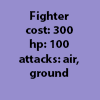
<style>
.page{position:relative;width:100px;height:100px;background:#968dce}
.page>*{position:absolute;margin:0}
.t1{font:12px "MyriadPro-Bold";color:#000000}
</style>
<div class="page">
<p class="t1" style="left:19px;top:11px;width:60px;height:68px;text-align:center">Fighter<br>cost: 300<br>hp: 100<br>attacks: air, ground</p>
</div>
